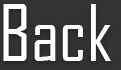
<style>
.page{position:relative;width:121px;height:70px;background:#333333}
.page>*{position:absolute;margin:0}
.t1{font:75px "AgencyFB-Reg";color:#ffffff}
</style>
<div class="page">
<p class="t1" style="left:3px;top:4px;width:108px;height:57px">Back</p>
</div>
